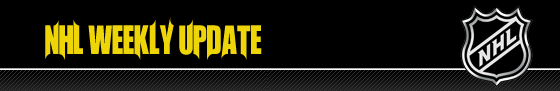
<style>
.page{position:relative;width:560px;height:91px;background:#000000}
.page>*{position:absolute;margin:0}
.t1{font:36px "Unrealised";color:#eed507}
</style>
<div class="page">
<p class="t1" style="left:45px;top:17px;width:217px;height:43px">NHL Weekly Update</p>
</div>
